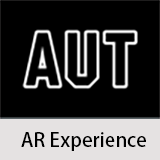
<style>
.page{position:relative;width:160px;height:160px;background:#000000}
.page>*{position:absolute;margin:0}
.t1{font:19.4px "AdobeHeitiStd-Regular";color:#000000}
</style>
<div class="page">
<p class="t1" style="left:21px;top:132px;width:125px;height:19px">AR Experience</p>
</div>
